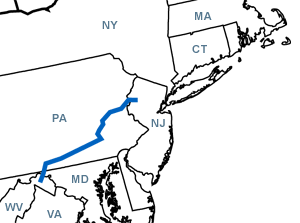
<style>
.page{position:relative;width:300px;height:223px;background:#ffffff}
.page>*{position:absolute;margin:0}
.t1{font:10.9px "Arial-BoldMT";letter-spacing:0.05em;color:#55778e}
</style>
<div class="page">
<p class="t1" style="left:195px;top:12px;width:17px;height:8px">MA</p>
<p class="t1" style="left:102px;top:21px;width:16px;height:8px">NY</p>
<p class="t1" style="left:192px;top:45px;width:15px;height:8px">CT</p>
<p class="t1" style="left:52px;top:114px;width:15px;height:8px">PA</p>
<p class="t1" style="left:151px;top:119px;width:14px;height:8px">NJ</p>
<p class="t1" style="left:72px;top:175px;width:17px;height:8px">MD</p>
<p class="t1" style="left:5px;top:203px;width:18px;height:8px">WV</p>
<p class="t1" style="left:47px;top:210px;width:15px;height:8px">VA</p>
</div>
